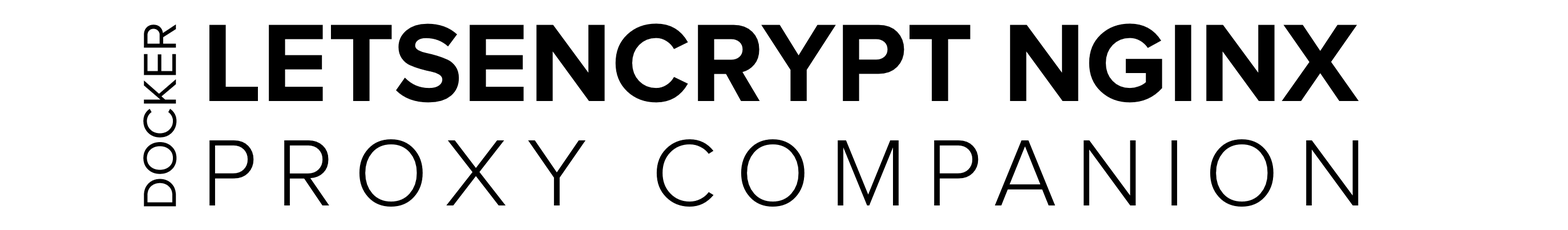
<style>
.page{position:relative;width:1568px;height:230px;background:#ffffff}
.page>*{position:absolute;margin:0}
.t1{font:47.9px "ProximaNova-Regular";color:#000000}
.t2{font:114.1px "ProximaNova-Bold";color:#000000}
.t3{font:97.6px "ProximaNova-Light";letter-spacing:0.198em;color:#000000}
</style>
<div class="page">
<p class="t1" style="left:143px;top:25px;width:34px;height:182px;rotate:-90deg">DOCKER</p>
<p class="t2" style="left:209px;top:23px;width:1150px;height:80px">LETSENCRYPT NGINX</p>
<p class="t3" style="left:209px;top:139px;width:1150px;height:68px">PROXY COMPANION</p>
</div>
